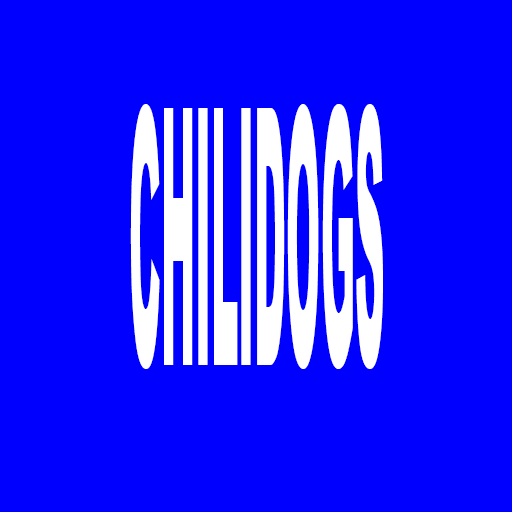
<style>
.page{position:relative;width:512px;height:512px;background:#0000ff}
.page>*{position:absolute;margin:0}
.t1{font:358.9px "Arial-Black";color:#ffffff;scale:0.11 1}
</style>
<div class="page">
<p class="t1" style="left:130px;top:104px;width:253px;height:265px">CHILIDOGS</p>
</div>
